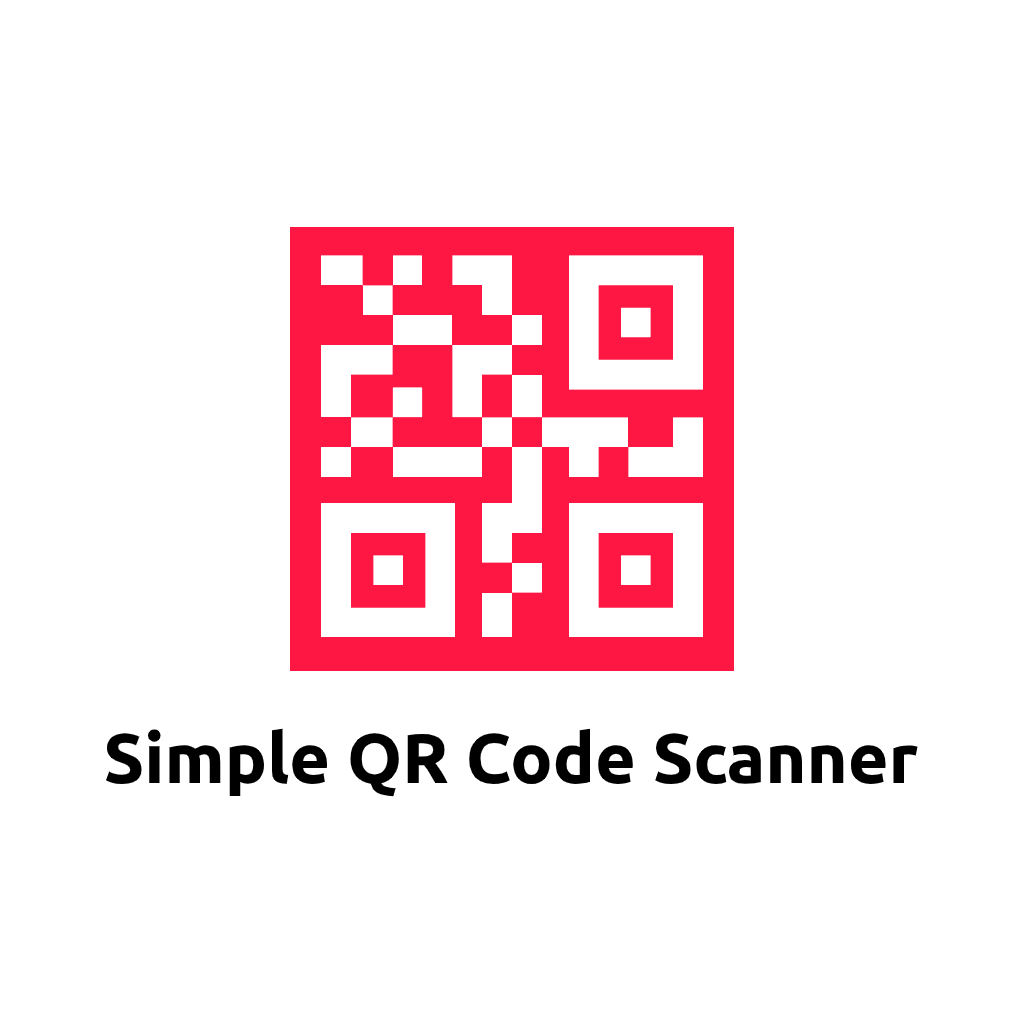
<style>
.page{position:relative;width:1024px;height:1024px;background:#ffffff}
.page>*{position:absolute;margin:0}
.t1{font:70px "Ubuntu-Bold";color:#000000}
</style>
<div class="page">
<p class="t1" style="left:106px;top:728px;width:812px;height:69px">Simple QR Code Scanner</p>
</div>
